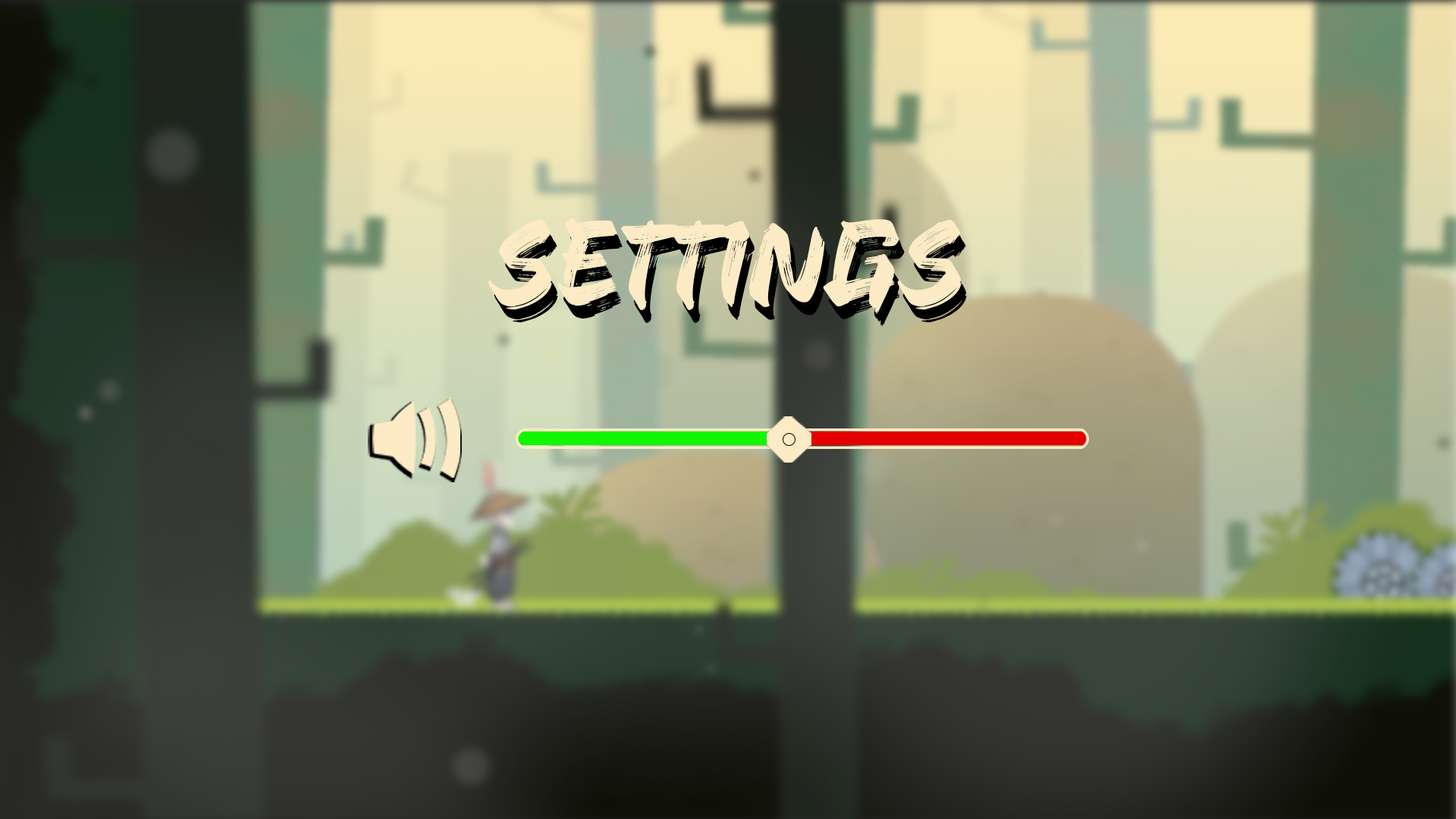
<style>
.page{position:relative;width:1456px;height:819px}
.page>*{position:absolute;margin:0}
.t1{font:118.6px "ShotengaiDemo-Regular";color:#fcebc5}
.t2{font:118.6px "ShotengaiDemo-Regular"}
</style>
<div class="page">
<p class="t1" style="left:488px;top:218px;width:474px;height:96px">SETTINGS</p>
<p class="t2" style="left:494px;top:231px;width:473px;height:96px">SETTINGS</p>
</div>
